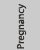
<style>
.page{position:relative;width:40px;height:50px;background:#cbcbcb}
.page>*{position:absolute;margin:0}
.t1{font:10.2px "MyriadPro-Regular";color:#2e2d2b}
</style>
<div class="page">
<p class="t1" style="left:16px;top:4px;width:11px;height:45px;rotate:-90deg">Pregnancy</p>
</div>
